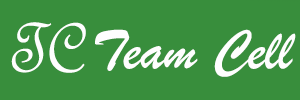
<style>
.page{position:relative;width:300px;height:100px;background:#388e3c}
.page>*{position:absolute;margin:0}
.t1{font:75px "FrenchScriptMT";color:#fefefe}
.t2{font:58.3px "BrushScriptMT";color:#fefefe}
</style>
<div class="page">
<p class="t1" style="left:11px;top:22px;width:75px;height:51px">TC</p>
<p class="t2" style="left:95px;top:29px;width:201px;height:48px">Team Cell</p>
</div>
